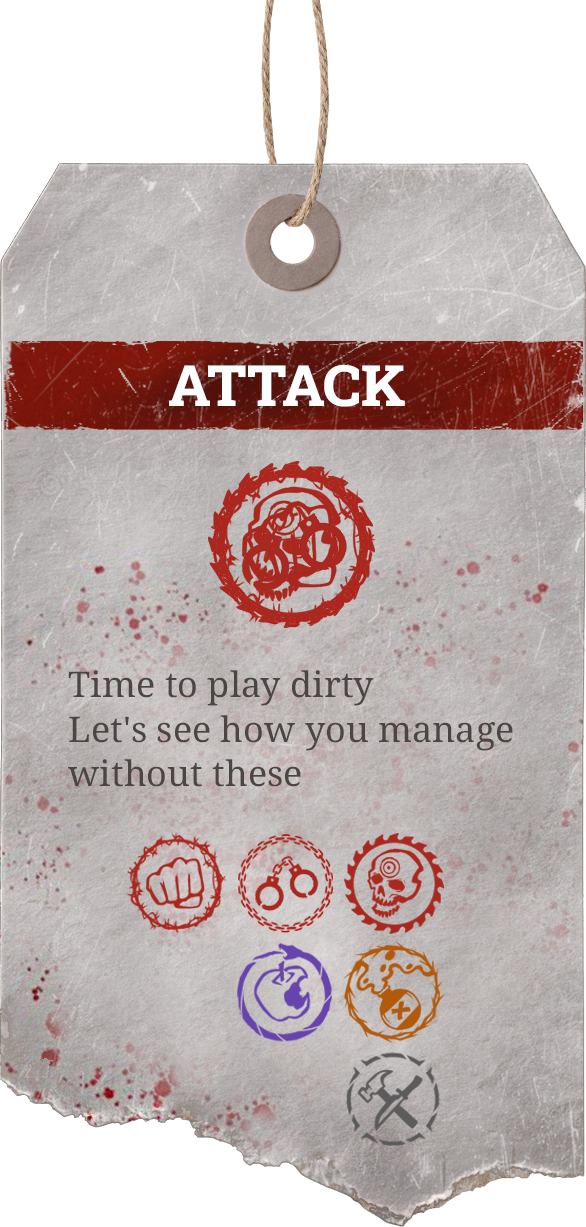
<style>
.page{position:relative;width:586px;height:1227px;background:#ffffff}
.page>*{position:absolute;margin:0}
.t1{font:57.1px "RobotoSlab-ExtraBold";color:#ffffff}
.t2{font:35.3px/44.6px "NotoSerif-Medium";color:#4b4544}
</style>
<div class="page">
<p class="t1" style="left:169px;top:364px;width:236px;height:43px">ATTACK</p>
<p class="t2" style="left:68px;top:670px;width:445px;height:117px">Time to play dirty<br>Let's see how you manage without these</p>
</div>
